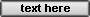
<style>
.page{position:relative;width:90px;height:17px}
.page>*{position:absolute;margin:0}
.t1{font:11px "Arial-BoldMT";color:#000000}
</style>
<div class="page">
<p class="t1" style="left:21px;top:4px;width:49px;height:8px">text here</p>
</div>
